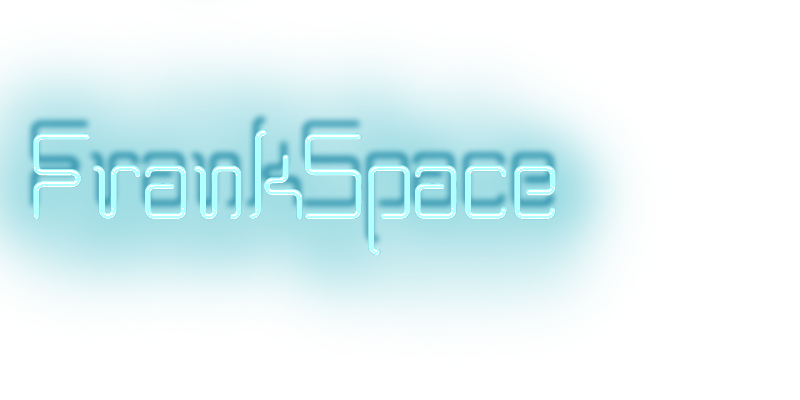
<style>
.page{position:relative;width:800px;height:400px;background:#ffffff}
.page>*{position:absolute;margin:0}
.t1{font:125px "BPneon";color:#b2ffff}
.t2{font:125px "BPneon";color:#b3f1f8}
</style>
<div class="page">
<p class="t1" style="left:33px;top:129px;width:523px;height:126px">FrankSpace</p>
<p class="t2" style="left:33px;top:129px;width:523px;height:126px">FrankSpace</p>
</div>
